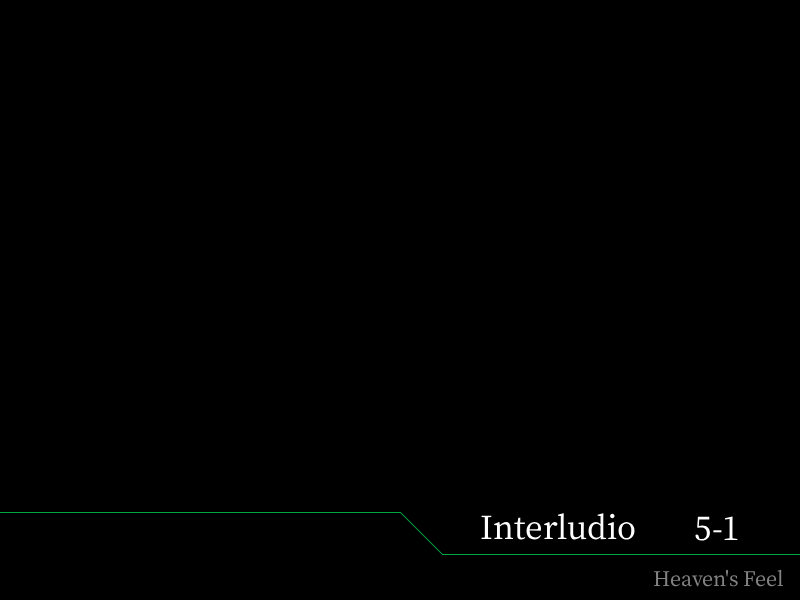
<style>
.page{position:relative;width:800px;height:600px;background:#000000}
.page>*{position:absolute;margin:0}
.t1{font:38px "OfficialFateFont-Medium";color:#ffffff}
.t2{font:24px "OfficialFateFont-Medium";color:#838383}
</style>
<div class="page">
<p class="t1" style="left:481px;top:513px;width:154px;height:27px">Interludio</p>
<p class="t1" style="left:695px;top:516px;width:43px;height:25px">5-1</p>
<p class="t2" style="left:653px;top:569px;width:130px;height:18px">Heaven's Feel</p>
</div>
